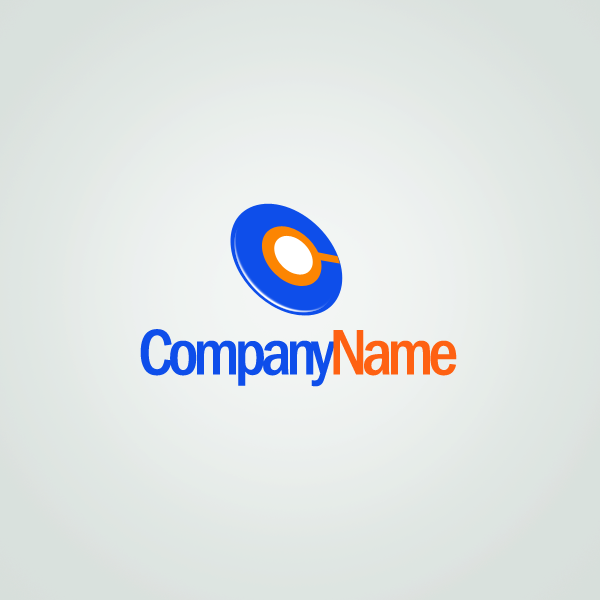
<style>
.page{position:relative;width:600px;height:600px}
.page>*{position:absolute;margin:0}
.t1{font:66.7px "FranklinGothic-MediumCond";letter-spacing:-0.08em;color:#0e4eea}
.t2{font:66.7px "FranklinGothic-MediumCond";letter-spacing:-0.08em;color:#fe6112}
</style>
<div class="page">
<p class="t1" style="left:140px;top:329px;width:317px;height:58px">Company<span class="t2">Name</span></p>
</div>
